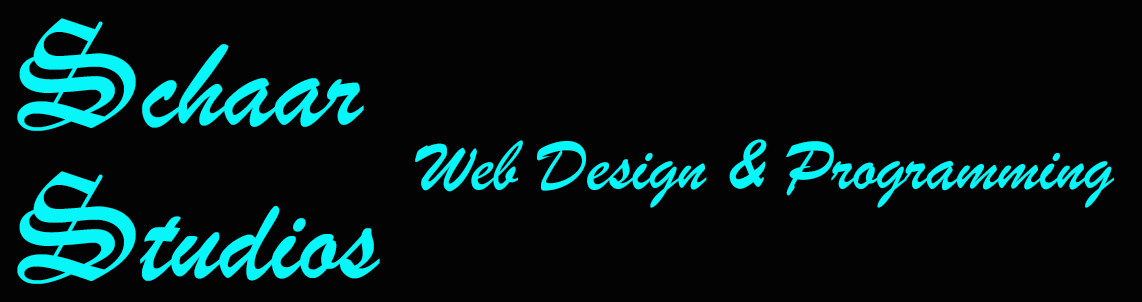
<style>
.page{position:relative;width:1142px;height:302px;background:#030303}
.page>*{position:absolute;margin:0}
.t1{font:150px "OldEnglishTextMT";color:#06f6f9}
.t2{font:125px "BrushScriptMT";color:#06f6f9}
.t3{font:75px "BrushScriptMT";color:#06f6f9}
</style>
<div class="page">
<p class="t1" style="left:17px;top:18px;width:119px;height:113px">S</p>
<p class="t2" style="left:142px;top:44px;width:222px;height:84px">chaar</p>
<p class="t3" style="left:415px;top:139px;width:699px;height:69px">Web Design &amp; Programming</p>
<p class="t1" style="left:17px;top:171px;width:119px;height:113px">S</p>
<p class="t2" style="left:140px;top:206px;width:240px;height:75px">tudios</p>
</div>
